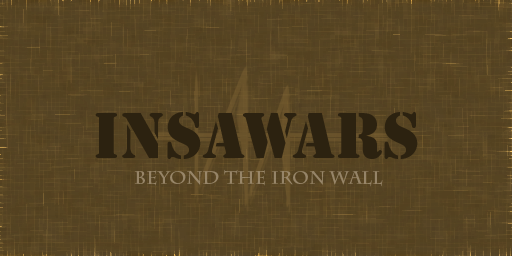
<style>
.page{position:relative;width:512px;height:256px}
.page>*{position:absolute;margin:0}
.t1{font:60px "StencilStd";color:#2c2210}
.t2{font:18px "CharlemagneStd-Bold";color:#968468}
</style>
<div class="page">
<p class="t1" style="left:95px;top:112px;width:323px;height:47px">INSAWars</p>
<p class="t2" style="left:134px;top:169px;width:249px;height:18px">Beyond The Iron Wall</p>
</div>
